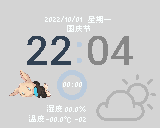
<style>
.page{position:relative;width:160px;height:128px;background:#d4d4d4}
.page>*{position:absolute;margin:0}
.t1{font:8px "ChillBitmap7x";color:#faffff}
.t2{font:40px "InterUI-Medium";color:#314153}
.t3{font:40px "InterUI-Medium";color:#878787}
.t4{font:40px "InterUI-Medium";color:#bacbdd}
</style>
<div class="page">
<p class="t1" style="left:45px;top:16px;width:37px;height:6px">2022/10/01</p>
<p class="t1" style="left:88px;top:16px;width:23px;height:7px">星期一</p>
<p class="t1" style="left:67px;top:25px;width:23px;height:7px">国庆节</p>
<p class="t2" style="left:27px;top:36px;width:44px;height:29px">22</p>
<p class="t3" style="left:88px;top:36px;width:45px;height:29px">04</p>
<p class="t4" style="left:77px;top:42px;width:5px;height:21px">:</p>
<p class="t1" style="left:63px;top:82px;width:19px;height:5px">00:00</p>
<p class="t1" style="left:47px;top:105px;width:15px;height:7px">湿度</p>
<p class="t1" style="left:65px;top:106px;width:21px;height:6px">00.0%</p>
<p class="t1" style="left:29px;top:115px;width:15px;height:7px">温度</p>
<p class="t1" style="left:46px;top:116px;width:25px;height:7px">-00.0℃</p>
<p class="t1" style="left:75px;top:117px;width:11px;height:5px">-02</p>
</div>
